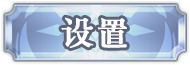
<style>
.page{position:relative;width:190px;height:65px}
.page>*{position:absolute;margin:0}
.t1{font:32.5px "TypographyOldP-Medium";color:#ffffff;font-weight:bold}
</style>
<div class="page">
<p class="t1" style="left:61px;top:17px;width:66px;height:31px">设置</p>
</div>
